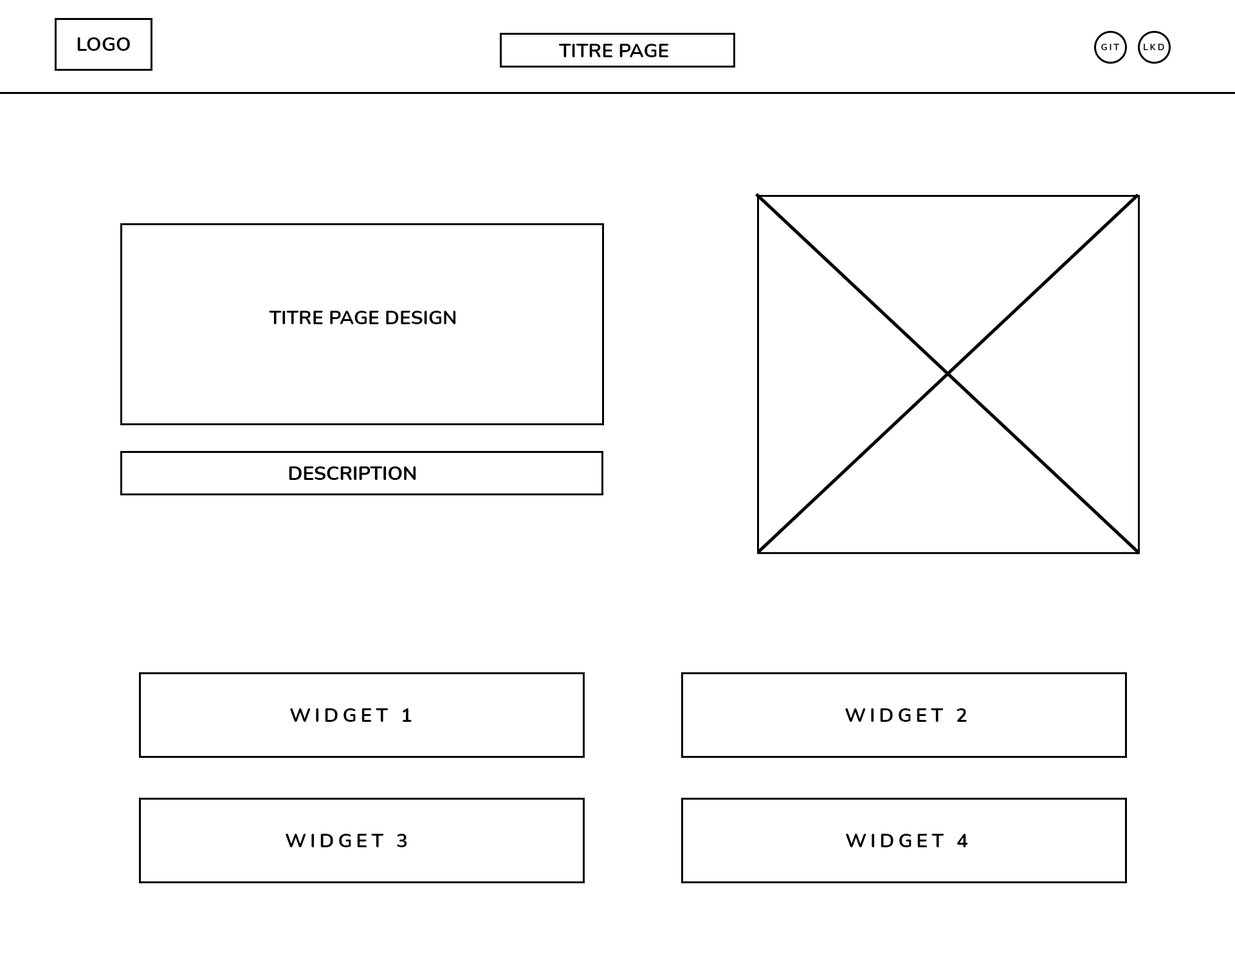
<style>
.page{position:relative;width:1235px;height:965px;background:#ffffff}
.page>*{position:absolute;margin:0}
.t1{font:19.3px "Nunito-Bold";color:#000000}
.t2{font:9px "Nunito-Bold";letter-spacing:0.2em;color:#000000;text-transform:uppercase}
.t3{font:19.3px "Nunito-Bold";letter-spacing:0.2em;color:#000000;text-transform:uppercase}
</style>
<div class="page">
<p class="t1" style="left:77px;top:37px;width:53px;height:14px">LOGO</p>
<p class="t1" style="left:559px;top:44px;width:110px;height:13px">TITRE PAGE</p>
<p class="t2" style="left:1102px;top:44px;width:18px;height:6px">git</p>
<p class="t2" style="left:1144px;top:44px;width:21px;height:6px">LKD</p>
<p class="t1" style="left:269px;top:311px;width:187px;height:13px">TITRE PAGE DESIGN</p>
<p class="t3" style="left:290px;top:708px;width:122px;height:14px">WIDGET 1</p>
<p class="t3" style="left:846px;top:708px;width:121px;height:14px">WIDGET 2</p>
<p class="t3" style="left:286px;top:834px;width:121px;height:13px">WIDGET 3</p>
<p class="t3" style="left:846px;top:834px;width:122px;height:13px">WIDGET 4</p>
</div>
